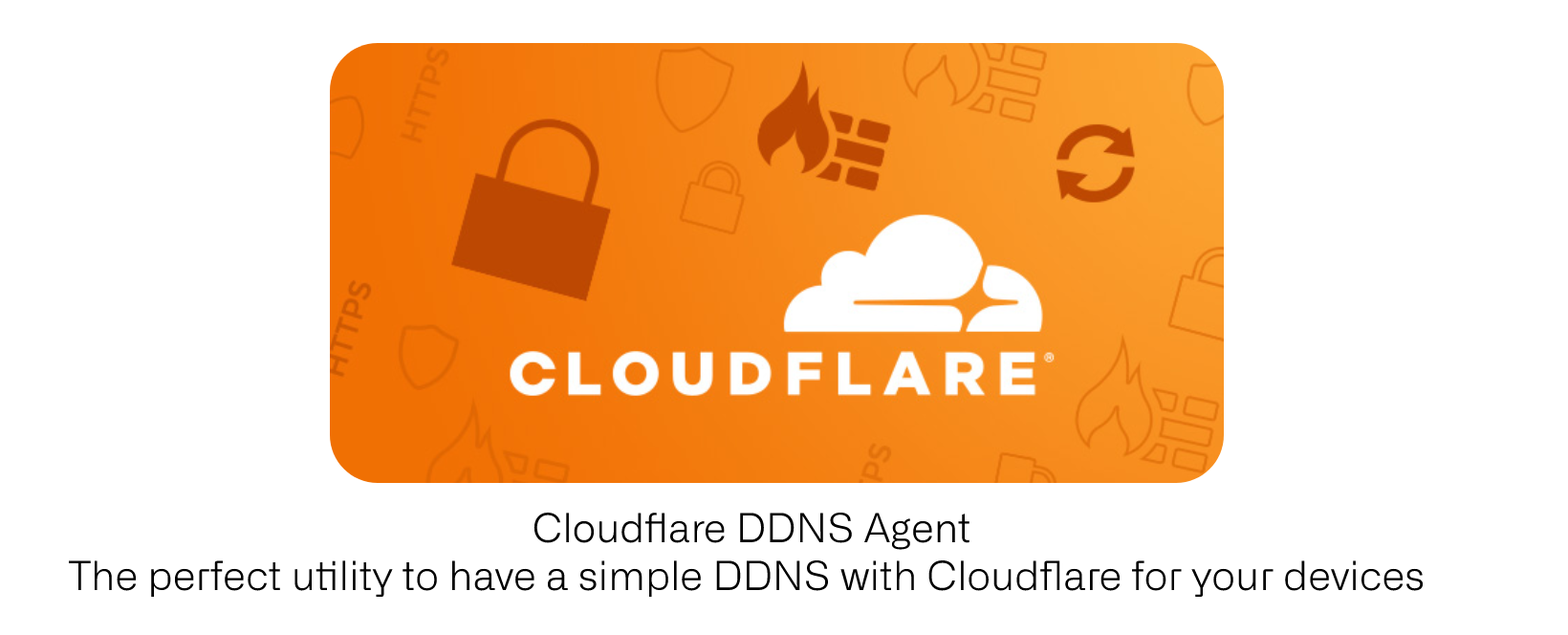
<style>
.page{position:relative;width:1568px;height:635px;background:#ffffff}
.page>*{position:absolute;margin:0}
.t1{font:40.2px "AllianceNo.2-Light";color:#000000}
.t2{font:40.2px "AllianceNo.1-Light";color:#000000}
</style>
<div class="page">
<p class="t1" style="left:69px;top:512px;width:1355px;height:86px;text-align:center"><span class="t2">Cloudflare DDNS Agent<br></span>The perfect utility to have a simple DDNS with Cloudflare for your devices</p>
</div>
